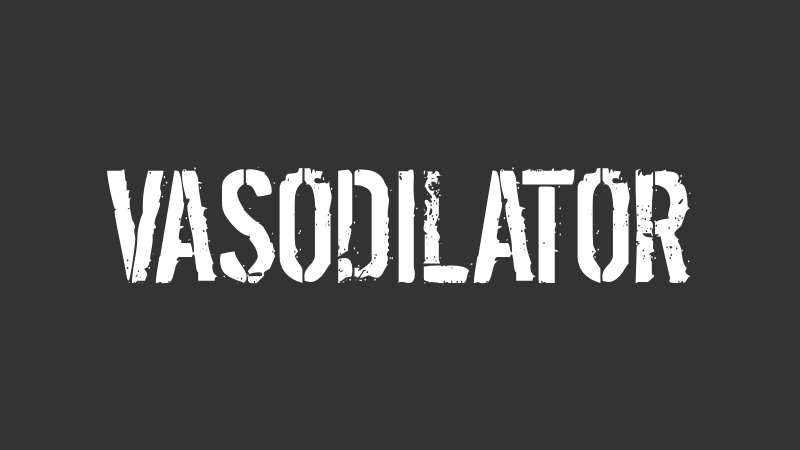
<style>
.page{position:relative;width:800px;height:450px;background:#333333}
.page>*{position:absolute;margin:0}
.t1{font:175.6px "DirtyEgo";color:#ffffff}
</style>
<div class="page">
<p class="t1" style="left:107px;top:166px;width:584px;height:118px">VASODILATOR</p>
</div>
